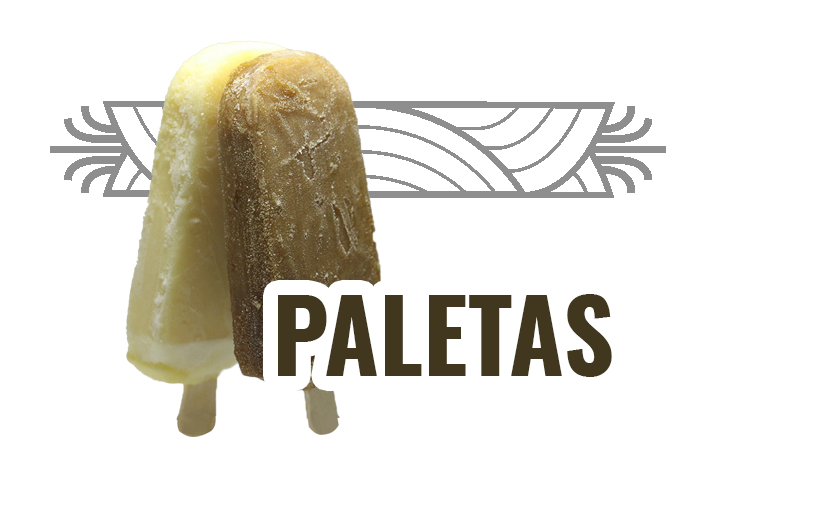
<style>
.page{position:relative;width:824px;height:514px;background:#ffffff}
.page>*{position:absolute;margin:0}
.t1{font:100px "Oswald-Bold";color:#41371e}
</style>
<div class="page">
<p class="t1" style="left:278px;top:294px;width:334px;height:83px">PALETAS</p>
</div>
